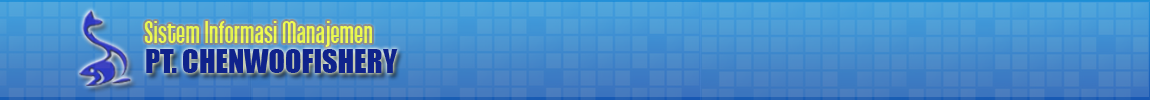
<style>
.page{position:relative;width:1150px;height:100px}
.page>*{position:absolute;margin:0}
.t1{font:30px "Qhytsdakx";color:#edf950}
.t2{font:30px "Impact";color:#0f238c}
</style>
<div class="page">
<p class="t1" style="left:144px;top:21px;width:228px;height:26px">Sistem Informasi Manajemen</p>
<p class="t2" style="left:146px;top:49px;width:252px;height:24px">PT. CHENWOOFISHERY</p>
</div>
